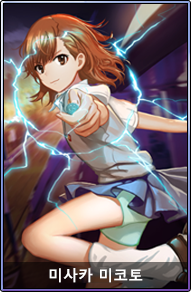
<style>
.page{position:relative;width:191px;height:292px}
.page>*{position:absolute;margin:0}
.t1{font:15px "MalgunGothicBold";color:#ffffff}
</style>
<div class="page">
<p class="t1" style="left:49px;top:268px;width:94px;height:15px">미사카 미코토</p>
</div>
